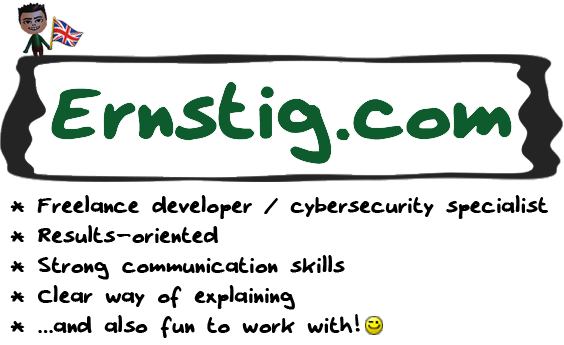
<style>
.page{position:relative;width:564px;height:345px;background:#ffffff}
.page>*{position:absolute;margin:0}
.t1{font:25px "Erno2002";color:#000000}
</style>
<div class="page">
<p class="t1" style="left:10px;top:195px;width:538px;height:143px">* Freelance developer / cybersecurity specialist<br>* Results-oriented<br>* Strong communication skills<br>* Clear way of explaining<br>* ...and also fun to work with!</p>
</div>
